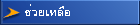
<style>
.page{position:relative;width:140px;height:25px}
.page>*{position:absolute;margin:0}
.t1{font:15.3px "EucrosiaDSE";color:#ffffff;scale:1.12 1}
</style>
<div class="page">
<p class="t1" style="left:25px;top:4px;width:45px;height:12px">ªèÇÂàËÅ×Í</p>
</div>
